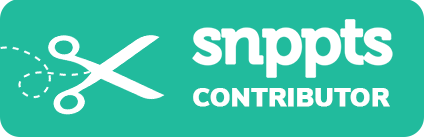
<style>
.page{position:relative;width:425px;height:137px;background:#21bb9d}
.page>*{position:absolute;margin:0}
.t1{font:66.8px "Museo-700";letter-spacing:-0.06em;color:#ffffff;font-weight:bold}
.t2{font:25.7px "NunitoSans-Black";color:#ffffff;font-weight:bold}
</style>
<div class="page">
<p class="t1" style="left:192px;top:19px;width:201px;height:59px">snppts</p>
<p class="t2" style="left:193px;top:88px;width:197px;height:19px">CONTRIBUTOR</p>
</div>
